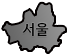
<style>
.page{position:relative;width:69px;height:56px;background:#ffffff}
.page>*{position:absolute;margin:0}
.t1{font:14px "HancomGothicBold";color:#000000}
</style>
<div class="page">
<p class="t1" style="left:22px;top:22px;width:27px;height:15px">서울</p>
</div>
